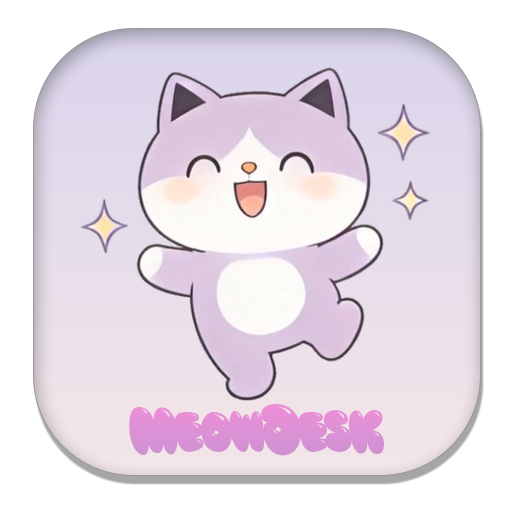
<style>
.page{position:relative;width:512px;height:512px;background:#ffffff}
.page>*{position:absolute;margin:0}
.t1{font:68.4px "BlowUp";color:#dc91d5}
</style>
<div class="page">
<p class="t1" style="left:129px;top:404px;width:255px;height:52px">MeowDesk</p>
</div>
